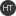
<style>
.page{position:relative;width:16px;height:16px;background:#363636}
.page>*{position:absolute;margin:0}
.t1{font:8px "HelveticaNeue-Thin"}
</style>
<div class="page">
<p class="t1" style="left:3px;top:5px;width:10px;height:6px">HT</p>
</div>
